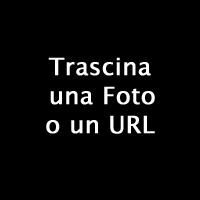
<style>
.page{position:relative;width:200px;height:200px;background:#000000}
.page>*{position:absolute;margin:0}
.t1{font:24px "LucidaGrande";color:#ffffff;font-weight:bold}
</style>
<div class="page">
<p class="t1" style="left:46px;top:57px;width:109px;height:77px;text-align:center">Trascina<br> una Foto<br>o un URL</p>
</div>
